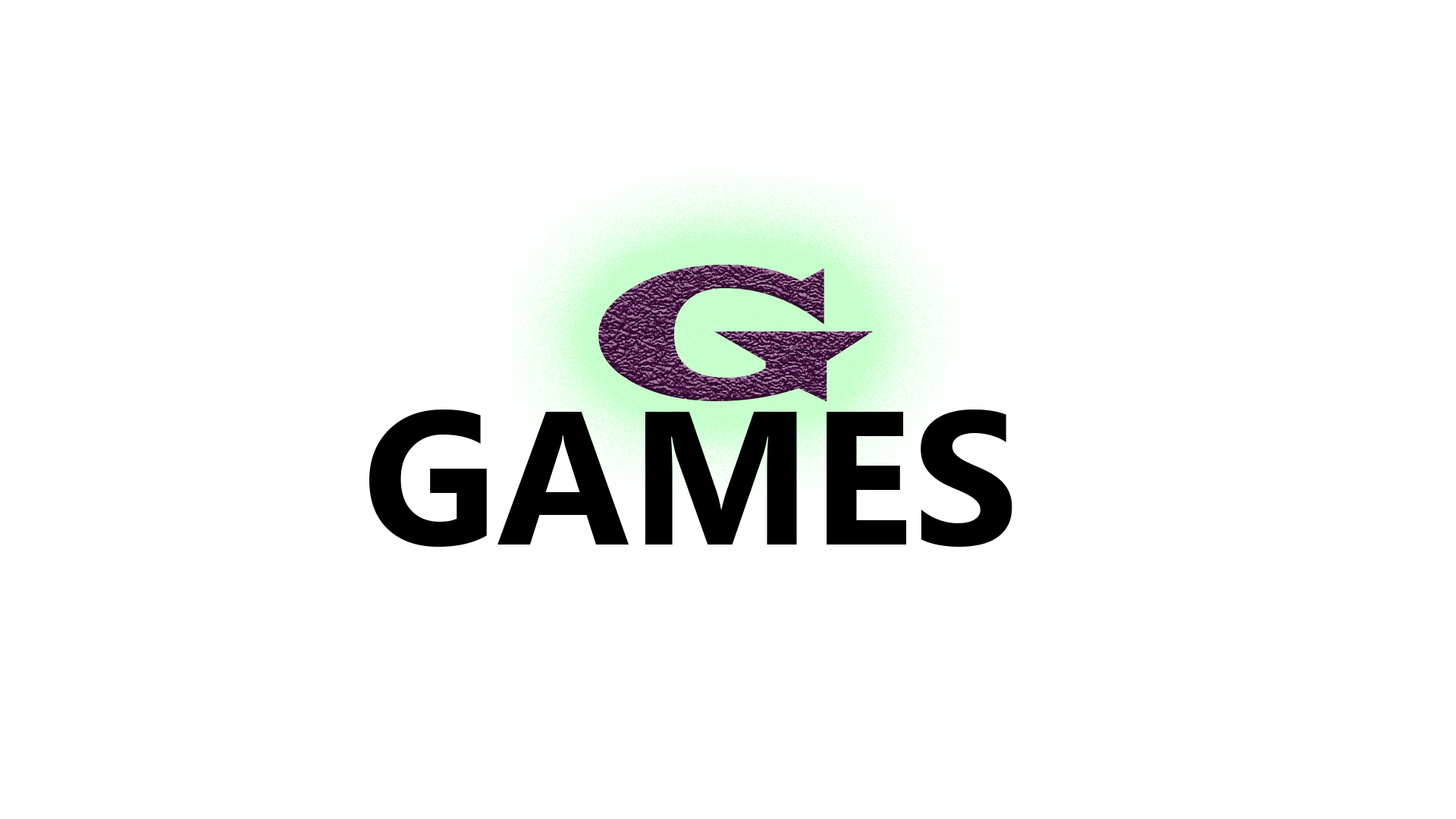
<style>
.page{position:relative;width:1456px;height:819px;background:#ffffff}
.page>*{position:absolute;margin:0}
.t1{font:189.6px "LatinWide"}
.t2{font:189.6px "MicrosoftTaiLe-Bold";color:#000000}
</style>
<div class="page">
<p class="t1" style="left:598px;top:265px;width:275px;height:137px">G</p>
<p class="t2" style="left:369px;top:409px;width:643px;height:138px">GAMES</p>
</div>
